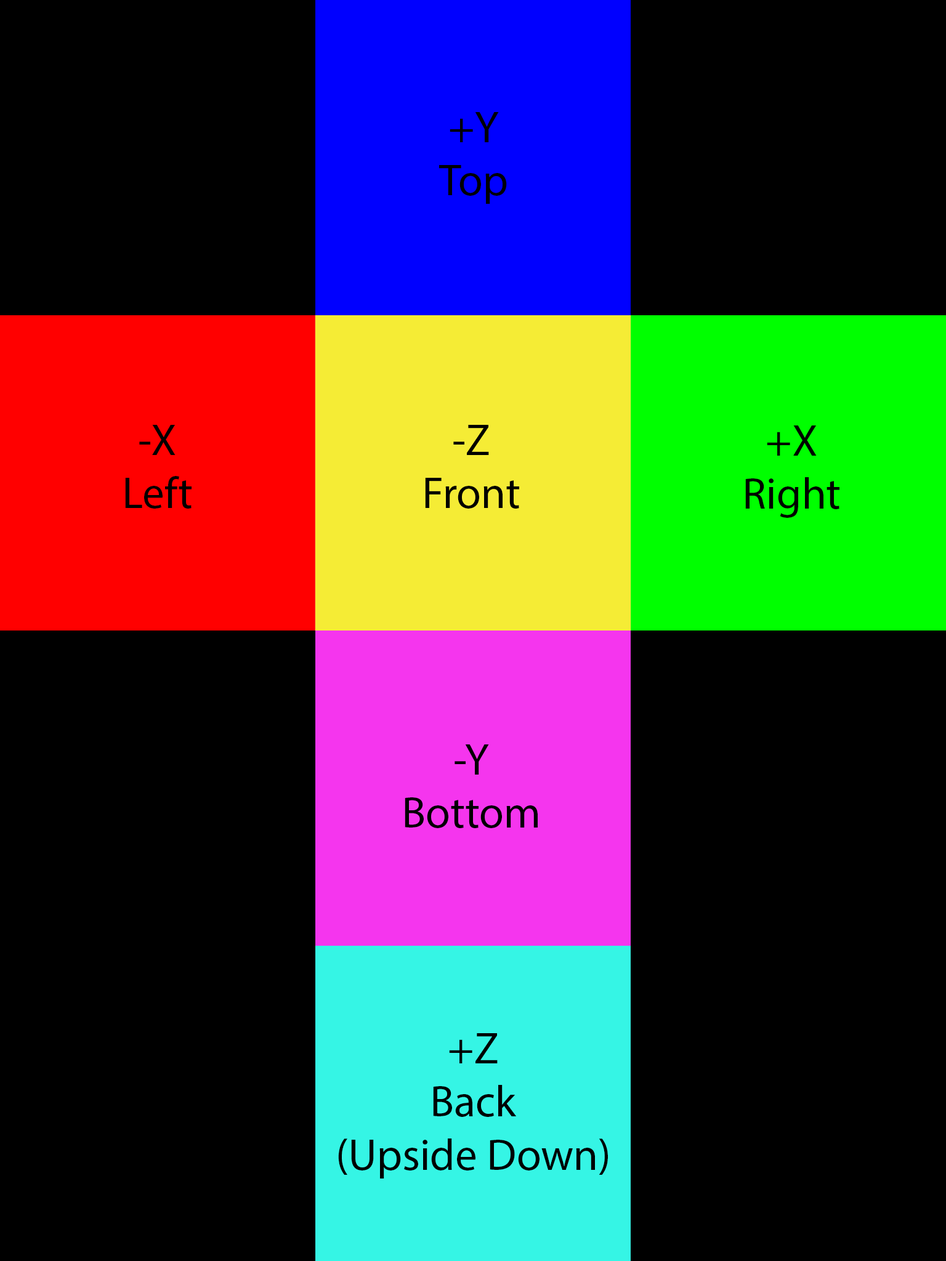
<style>
.page{position:relative;width:946px;height:1261px;background:#000000}
.page>*{position:absolute;margin:0}
.t1{font:44.3px "MyriadPro-Regular";color:#000000}
</style>
<div class="page">
<p class="t1" style="left:439px;top:112px;width:68px;height:92px;text-align:center">+Y<br>Top</p>
<p class="t1" style="left:125px;top:425px;width:66px;height:84px;text-align:center">-X<br>Left</p>
<p class="t1" style="left:425px;top:425px;width:94px;height:84px;text-align:center">-Z<br>Front</p>
<p class="t1" style="left:745px;top:425px;width:94px;height:93px;text-align:center">+X<br>Right</p>
<p class="t1" style="left:405px;top:744px;width:132px;height:84px;text-align:center">-Y<br>Bottom</p>
<p class="t1" style="left:338px;top:1033px;width:270px;height:145px;text-align:center">+Z<br>Back<br>(Upside Down)</p>
</div>
